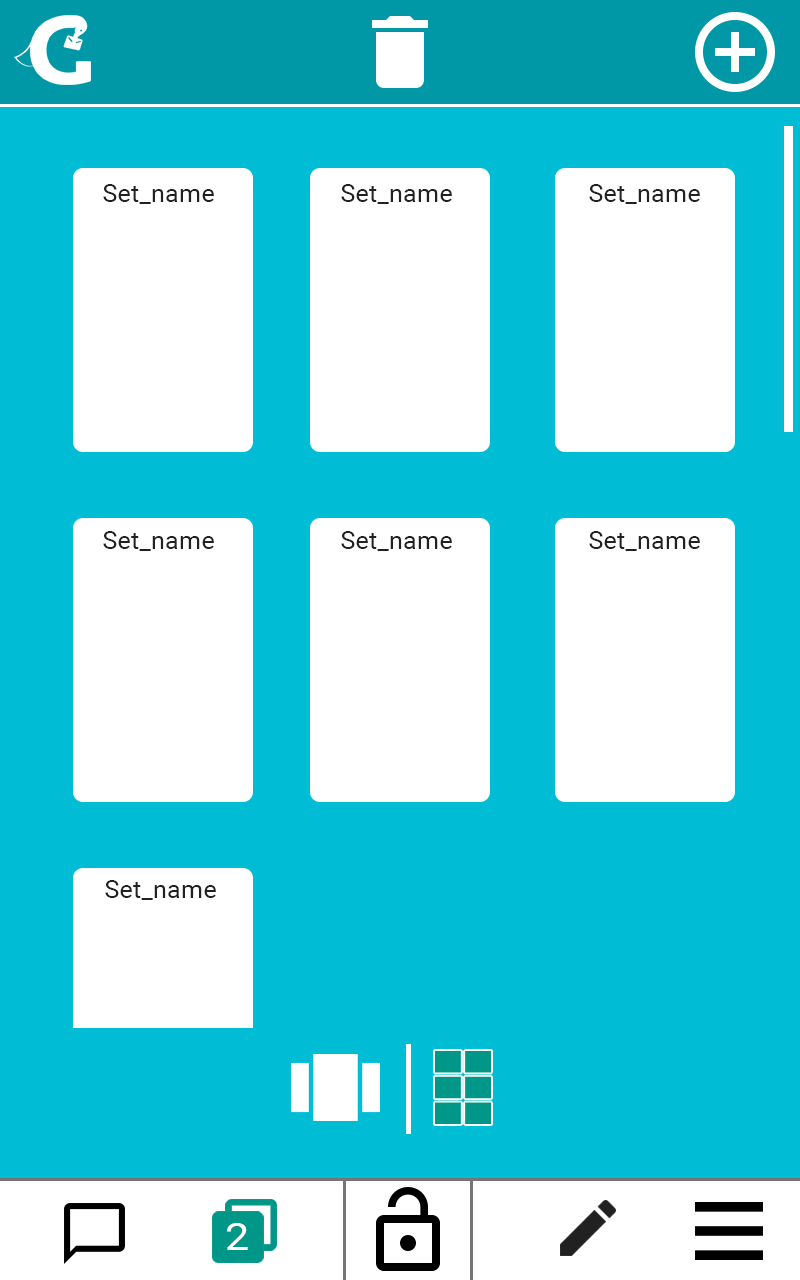
<style>
.page{position:relative;width:800px;height:1280px;background:#00bcd4}
.page>*{position:absolute;margin:0}
.t1{font:25.5px "Roboto-Regular";color:#212121}
.t2{font:37.5px "Roboto-Regular";color:#ffffff;scale:1.16 1}
</style>
<div class="page">
<p class="t1" style="left:103px;top:184px;width:111px;height:20px">Set_name</p>
<p class="t1" style="left:341px;top:184px;width:111px;height:20px">Set_name</p>
<p class="t1" style="left:589px;top:184px;width:111px;height:20px">Set_name</p>
<p class="t1" style="left:103px;top:531px;width:111px;height:20px">Set_name</p>
<p class="t1" style="left:341px;top:531px;width:111px;height:20px">Set_name</p>
<p class="t1" style="left:589px;top:531px;width:111px;height:20px">Set_name</p>
<p class="t1" style="left:105px;top:880px;width:111px;height:20px">Set_name</p>
<p class="t2" style="left:227px;top:1223px;width:21px;height:27px">2</p>
</div>
